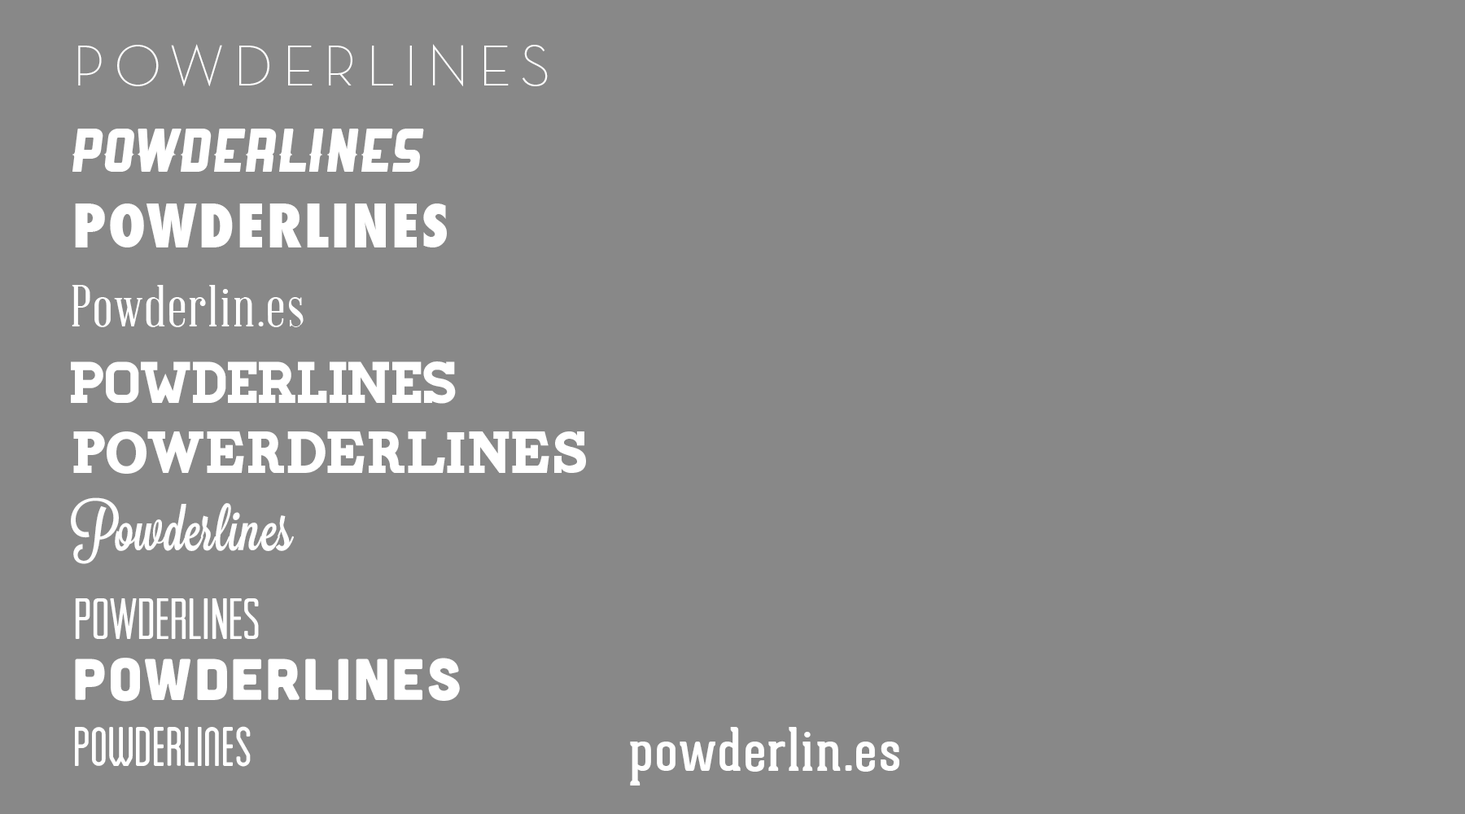
<style>
.page{position:relative;width:1465px;height:814px;background:#888888}
.page>*{position:absolute;margin:0}
.t1{font:58.6px "NeutraDisp-Light";letter-spacing:0.2em;color:#ffffff;text-transform:uppercase}
.t2{font:58.6px "Ranger";color:#ffffff;text-transform:uppercase}
.t3{font:58.6px "Futura-CondensedExtraBold";letter-spacing:0.05em;color:#ffffff;text-transform:uppercase}
.t4{font:58.6px "AbrahamLincoln";letter-spacing:0.05em;color:#ffffff}
.t5{font:58.6px "Homestead-Regular";color:#ffffff}
.t6{font:58.6px "Carton";color:#ffffff}
.t7{font:58.6px "Lavanderia-Sturdy";color:#ffffff}
.t8{font:58.6px "ArvilSans";color:#ffffff}
.t9{font:58.6px "Cubano-Regular";letter-spacing:0.05em;color:#ffffff}
.t10{font:58.6px "Blanch-Condensed";color:#ffffff}
.t11{font:58.6px "GearedSlab-Regular";letter-spacing:0.05em;color:#ffffff}
</style>
<div class="page">
<p class="t1" style="left:78px;top:44px;width:470px;height:42px">Powderlines</p>
<p class="t2" style="left:72px;top:129px;width:352px;height:43px">Powderlines</p>
<p class="t3" style="left:75px;top:203px;width:372px;height:44px">Powderlines</p>
<p class="t4" style="left:72px;top:285px;width:232px;height:42px">Powderlin.es</p>
<p class="t5" style="left:71px;top:361px;width:385px;height:43px">POWDERLINES</p>
<p class="t6" style="left:73px;top:431px;width:513px;height:43px">Powerderlines</p>
<p class="t7" style="left:71px;top:497px;width:223px;height:67px">Powderlines</p>
<p class="t8" style="left:75px;top:598px;width:184px;height:41px">Powderlines</p>
<p class="t9" style="left:75px;top:658px;width:385px;height:44px">Powderlines</p>
<p class="t10" style="left:75px;top:726px;width:176px;height:41px">Powderlines</p>
<p class="t11" style="left:630px;top:727px;width:269px;height:58px">powderlin.es</p>
</div>
